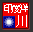
<style>
.page{position:relative;width:33px;height:32px;background:#f20000}
.page>*{position:absolute;margin:0}
.t1{font:10.4px "SimSun";letter-spacing:-0.25em;color:#ffffff}
.t2{font:11.7px "SimSun";color:#ffffff}
</style>
<div class="page">
<p class="t1" style="left:4px;top:4px;width:24px;height:9px">印度洋</p>
<p class="t2" style="left:16px;top:15px;width:11px;height:12px">川</p>
</div>
